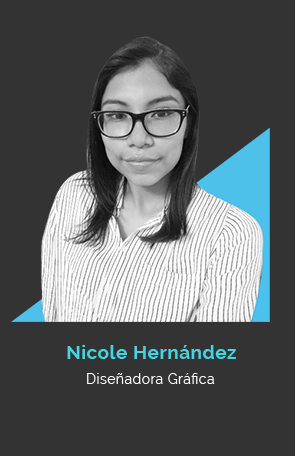
<style>
.page{position:relative;width:295px;height:456px;background:#333333}
.page>*{position:absolute;margin:0}
.t1{font:19px "Raleway-Bold";letter-spacing:0.025em;color:#47d4e2}
.t2{font:14.1px "Raleway-Regular";letter-spacing:0.025em;color:#ffffff}
</style>
<div class="page">
<p class="t1" style="left:67px;top:345px;width:169px;height:14px">Nicole Hernández</p>
<p class="t2" style="left:87px;top:373px;width:128px;height:11px">Diseñadora Gráfica</p>
</div>
